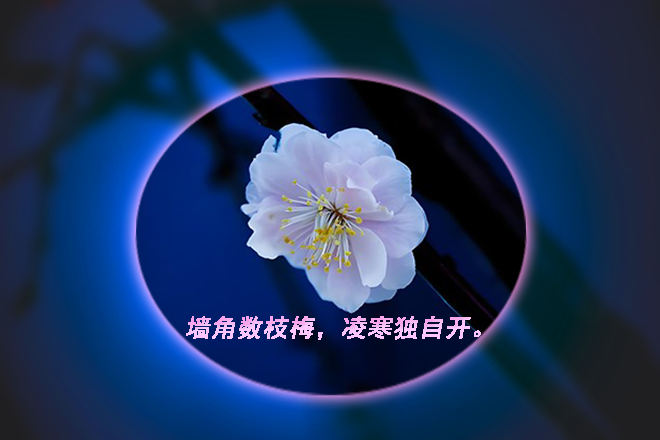
<style>
.page{position:relative;width:660px;height:440px}
.page>*{position:absolute;margin:0}
.t1{font:25px "SimHei";color:#f2c6f3;font-weight:bold;font-style:italic}
</style>
<div class="page">
<p class="t1" style="left:186px;top:316px;width:295px;height:24px">墙角数枝梅，凌寒独自开。</p>
</div>
